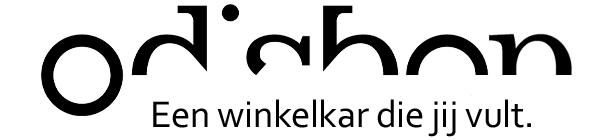
<style>
.page{position:relative;width:595px;height:140px;background:#ffffff}
.page>*{position:absolute;margin:0}
.t1{font:38.9px "Corbel";letter-spacing:-0.01em;color:#000000}
</style>
<div class="page">
<p class="t1" style="left:153px;top:99px;width:378px;height:38px">Een winkelkar die jij vult.</p>
</div>
